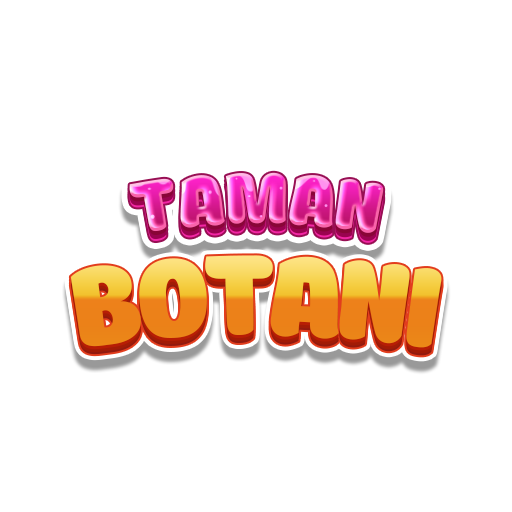
<style>
.page{position:relative;width:512px;height:512px;background:#ffffff}
.page>*{position:absolute;margin:0}
.t1{font:79.2px "Boomboom"}
.t2{font:124.7px "Boomboom";letter-spacing:-0.04em}
</style>
<div class="page">
<p class="t1" style="left:129px;top:172px;width:255px;height:61px">TAMAN</p>
<p class="t2" style="left:70px;top:255px;width:372px;height:93px">BOTANI</p>
</div>
